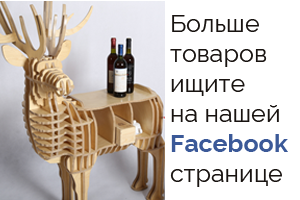
<style>
.page{position:relative;width:300px;height:200px;background:#ffffff}
.page>*{position:absolute;margin:0}
.t1{font:25px "Raleway-Regular";color:#181310}
.t2{font:25px "Raleway-Bold";color:#3b5998}
</style>
<div class="page">
<p class="t1" style="left:170px;top:15px;width:118px;height:172px">Больше <br>товаров<br>ищите <br>на нашей<br><span class="t2">Facebook<br></span>странице</p>
</div>
